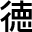
<style>
.page{position:relative;width:32px;height:32px;background:#ffffff}
.page>*{position:absolute;margin:0}
.t1{font:33px "GD-HighwayGothicJA-OTF";color:#000000}
</style>
<div class="page">
<p class="t1" style="left:0px;top:0px;width:33px;height:33px">徳</p>
</div>
